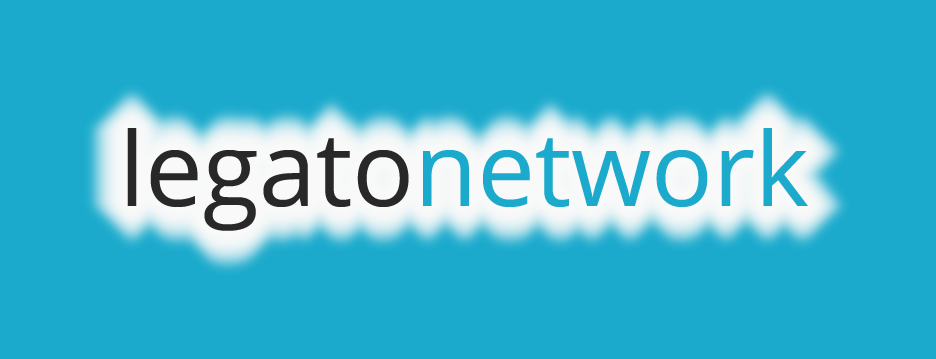
<style>
.page{position:relative;width:936px;height:359px;background:#1baacc}
.page>*{position:absolute;margin:0}
.t1{font:102.7px "OpenSans";color:#1baacc}
.t2{font:102.7px "OpenSans";color:#282828}
</style>
<div class="page">
<p class="t1" style="left:127px;top:128px;width:681px;height:103px"><span class="t2">legato</span>network</p>
</div>
